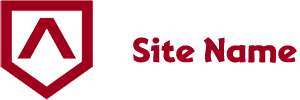
<style>
.page{position:relative;width:300px;height:100px;background:#ffffff}
.page>*{position:absolute;margin:0}
.t1{font:30px "Adventuring";letter-spacing:-0.02em;color:#a0001e}
</style>
<div class="page">
<p class="t1" style="left:133px;top:37px;width:164px;height:26px">Site Name</p>
</div>
